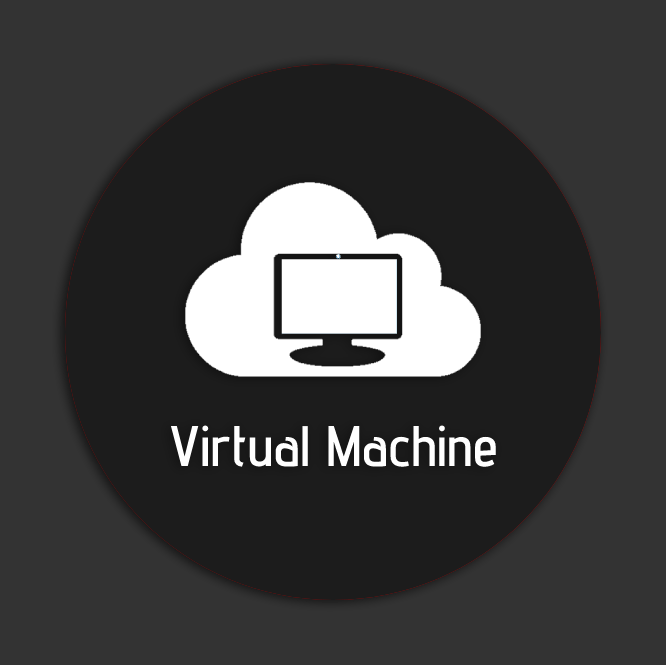
<style>
.page{position:relative;width:666px;height:665px;background:#333333}
.page>*{position:absolute;margin:0}
.t1{font:57px "AdventPro-SemiBold";color:#ffffff}
</style>
<div class="page">
<p class="t1" style="left:170px;top:425px;width:326px;height:42px">Virtual Machine</p>
</div>
